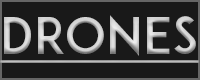
<style>
.page{position:relative;width:200px;height:80px;background:#191919}
.page>*{position:absolute;margin:0}
.t1{font:50px "ADAM.CGPRO";color:#cecece;text-decoration:underline}
</style>
<div class="page">
<p class="t1" style="left:0px;top:15px;width:199px;height:48px">DRONES</p>
</div>
